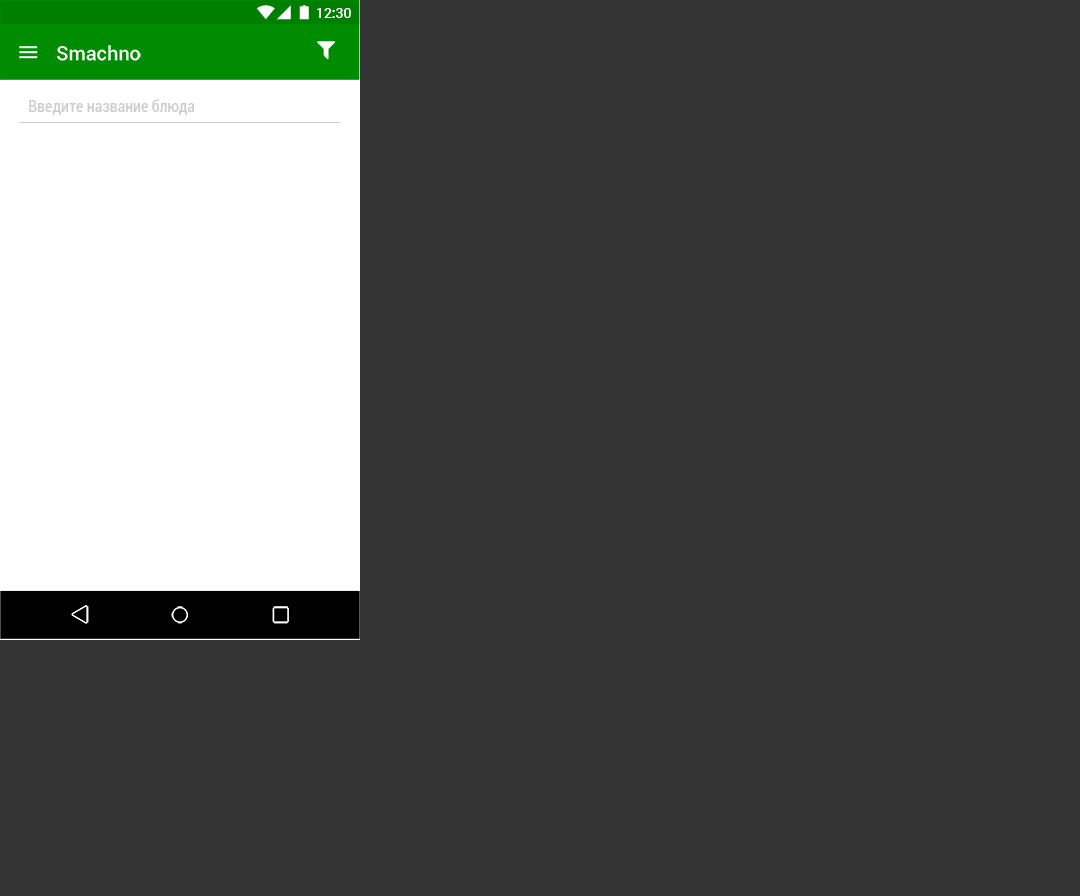
<style>
.page{position:relative;width:1080px;height:896px;background:#333333}
.page>*{position:absolute;margin:0}
.t1{font:14px "Roboto-Medium";color:#ffffff}
.t2{font:20px "Roboto-Medium";color:#ffffff}
.t3{font:16px "Roboto-Condensed";color:#cccccc}
</style>
<div class="page">
<p class="t1" style="left:317px;top:8px;width:34px;height:10px">12:30</p>
<p class="t2" style="left:57px;top:45px;width:84px;height:16px">Smachno</p>
<p class="t3" style="left:29px;top:99px;width:166px;height:16px">Введите название блюда</p>
</div>
